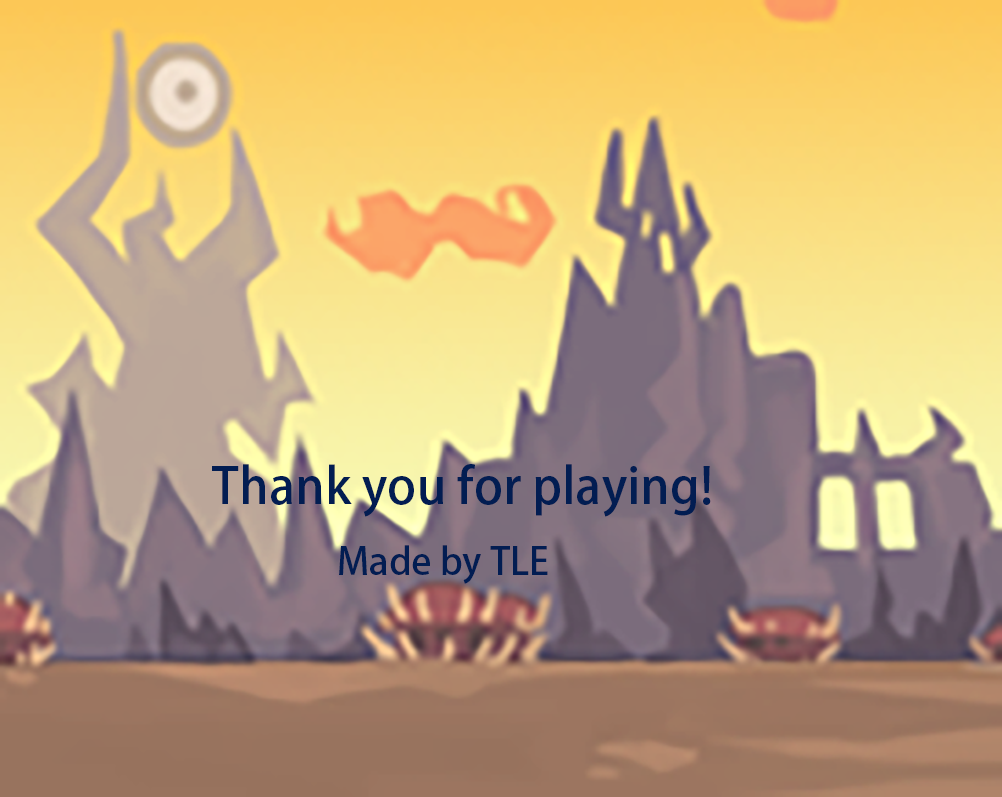
<style>
.page{position:relative;width:1002px;height:797px}
.page>*{position:absolute;margin:0}
.t1{font:49.4px "AdobeHeitiStd-Regular";color:#021d52}
.t2{font:37.1px "AdobeHeitiStd-Regular";color:#021d52}
</style>
<div class="page">
<p class="t1" style="left:212px;top:464px;width:499px;height:53px">Thank you for playing!</p>
<p class="t2" style="left:339px;top:545px;width:209px;height:39px">Made by TLE</p>
</div>
